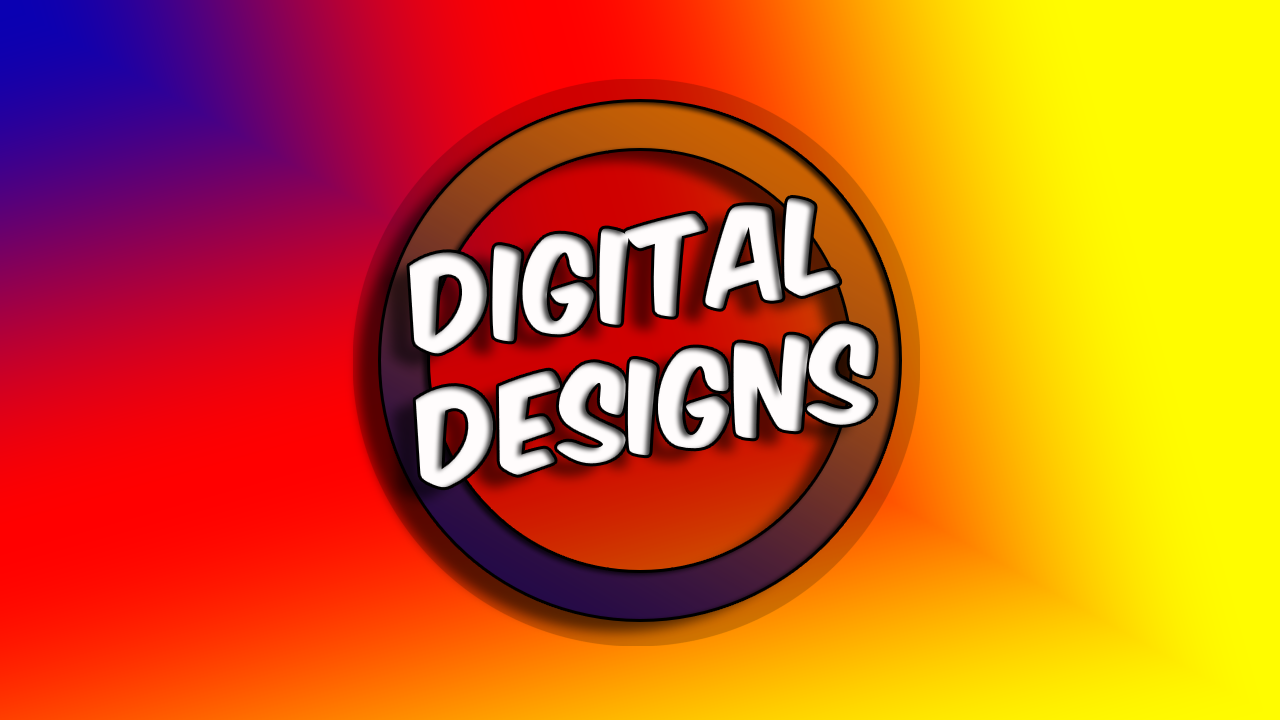
<style>
.page{position:relative;width:1280px;height:720px}
.page>*{position:absolute;margin:0}
.t1{font:111px "KomikaAxis";color:#fffcfc}
</style>
<div class="page">
<p class="t1" style="left:409px;top:197px;width:467px;height:292px;rotate:-9deg">DIGITAL DESIGNS</p>
</div>
